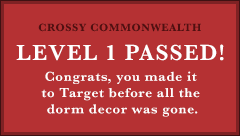
<style>
.page{position:relative;width:240px;height:136px;background:#b53133}
.page>*{position:absolute;margin:0}
.t1{font:11px "Baskerville-Bold";letter-spacing:0.05em;color:#501011}
.t2{font:22.7px "Baskerville-SemiBold";letter-spacing:0.05em;color:#ffffff}
.t3{font:13.6px "Baskerville-SemiBold";letter-spacing:0.05em;color:#ffffff}
</style>
<div class="page">
<p class="t1" style="left:38px;top:23px;width:163px;height:9px">CROSSY COMMONWEALTH</p>
<p class="t2" style="left:16px;top:44px;width:208px;height:17px">LEVEL 1 PASSED!</p>
<p class="t3" style="left:41px;top:71px;width:159px;height:46px;text-align:center">Congrats, you made it <br>to Target before all the <br>dorm decor was gone.</p>
</div>
